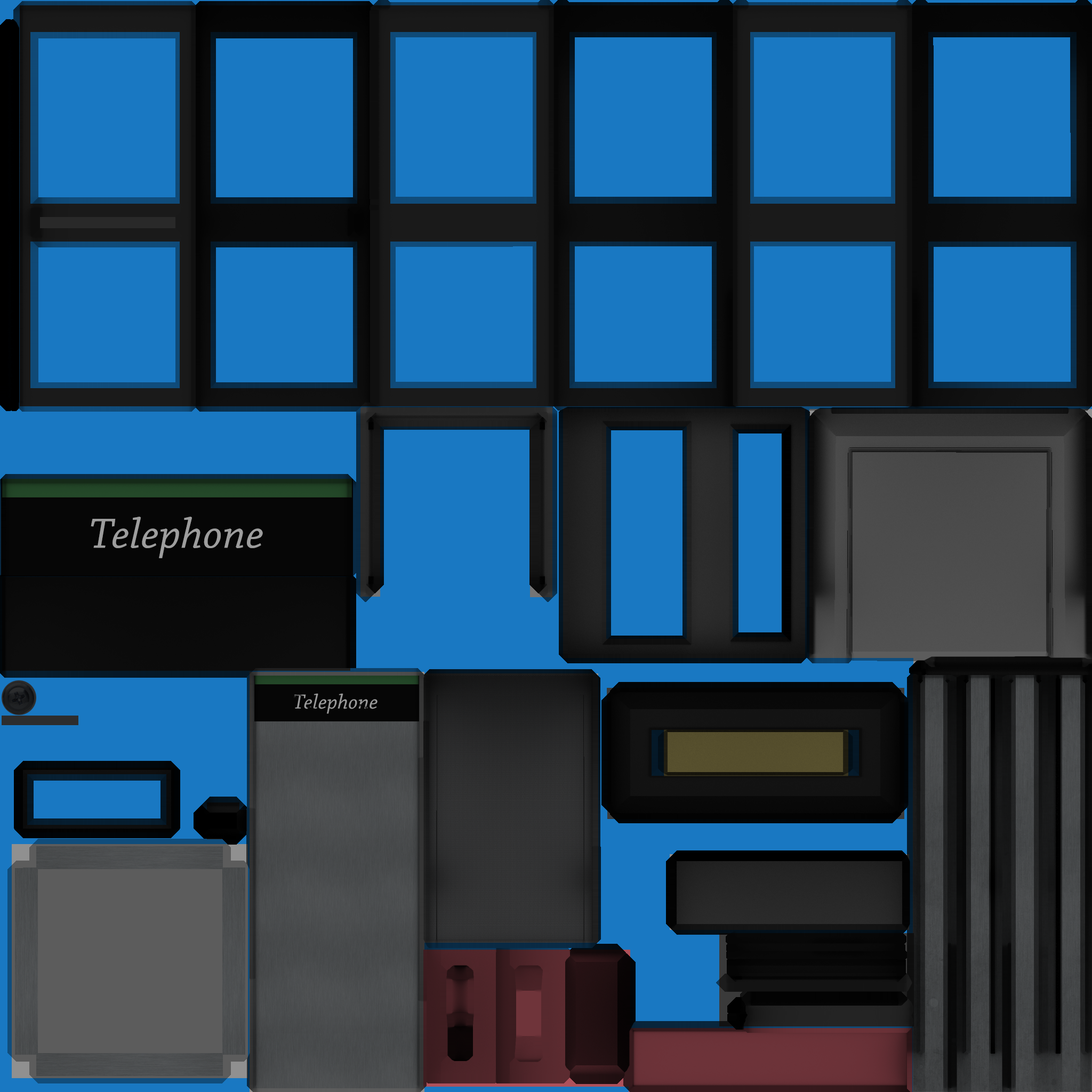
<style>
.page{position:relative;width:1092px;height:1092px;background:#1978c2}
.page>*{position:absolute;margin:0}
.t1{font:44.3px "ChaparralPro-Italic";letter-spacing:0.01em;color:#9d9d9d}
</style>
<div class="page">
<p class="t1" style="left:91px;top:517px;width:172px;height:41px">Telephone</p>
</div>
